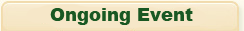
<style>
.page{position:relative;width:244px;height:31px;background:#f6e7c8}
.page>*{position:absolute;margin:0}
.t1{font:18px "Arial-Black";color:#195823}
</style>
<div class="page">
<p class="t1" style="left:50px;top:8px;width:143px;height:17px">Ongoing Event</p>
</div>
